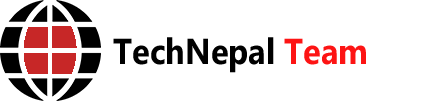
<style>
.page{position:relative;width:435px;height:101px;background:#ffffff}
.page>*{position:absolute;margin:0}
.t1{font:36px "Ebrima-Bold";color:#000000;scale:0.9 1}
.t2{font:36px "Ebrima-Bold";color:#fd1414;scale:0.9 1}
</style>
<div class="page">
<p class="t1" style="left:113px;top:37px;width:253px;height:36px">TechNepal <span class="t2">Team</span></p>
</div>
